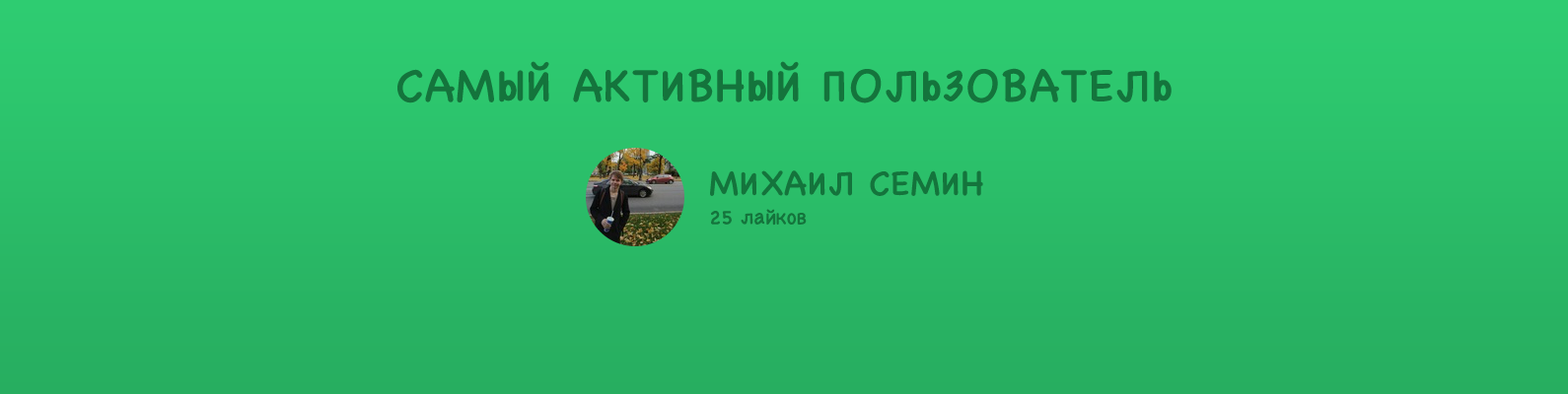
<style>
.page{position:relative;width:1568px;height:394px}
.page>*{position:absolute;margin:0}
.t1{font:47.3px "ChalkboardSE-Regular";letter-spacing:0.02em;color:#14743c;text-transform:uppercase}
.t2{font:35.5px "ChalkboardSE-Regular";letter-spacing:0.02em;color:#14743c;text-transform:uppercase}
.t3{font:19.7px "ChalkboardSE-Regular";letter-spacing:0.02em;color:#14743c}
</style>
<div class="page">
<p class="t1" style="left:397px;top:61px;width:775px;height:43px">самый активный пользователь</p>
<p class="t2" style="left:710px;top:171px;width:273px;height:25px">михаил семин</p>
<p class="t3" style="left:711px;top:209px;width:96px;height:17px">25 лайков</p>
</div>
